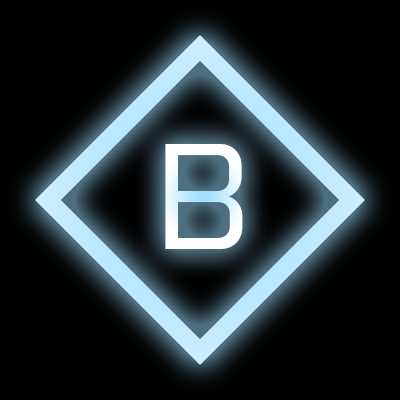
<style>
.page{position:relative;width:400px;height:400px;background:#000000}
.page>*{position:absolute;margin:0}
.t1{font:150px "Purista";color:#ffffff}
</style>
<div class="page">
<p class="t1" style="left:165px;top:144px;width:78px;height:105px">B</p>
</div>
